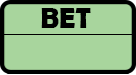
<style>
.page{position:relative;width:136px;height:75px;background:#a8d59d}
.page>*{position:absolute;margin:0}
.t1{font:29.2px "BerlinSansFBDemi-Bold";color:#000000}
</style>
<div class="page">
<p class="t1" style="left:41px;top:8px;width:50px;height:20px">BET</p>
</div>
